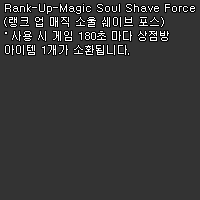
<style>
.page{position:relative;width:200px;height:200px;background:#333333}
.page>*{position:absolute;margin:0}
.t1{font:11px/14px "Dotum";color:#ffffff}
</style>
<div class="page">
<p class="t1" style="left:4px;top:4px;width:191px;height:51px">Rank-Up-Magic Soul Shave Force<br>(랭크 업 매직 소울 쉐이브 포스)<br>˚ 사용 시 게임 180초 마다 상점방<br>아이템 1개가 소환됩니다.</p>
</div>
